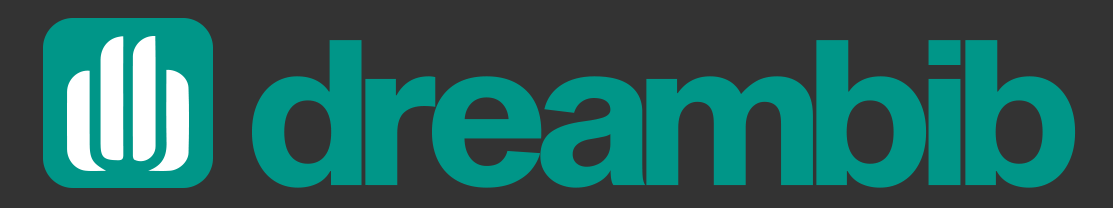
<style>
.page{position:relative;width:1113px;height:208px;background:#333333}
.page>*{position:absolute;margin:0}
.t1{font:200.1px "SequelSans-BoldDisp";letter-spacing:-0.04em;color:#009688}
</style>
<div class="page">
<p class="t1" style="left:252px;top:40px;width:824px;height:148px">dreambib</p>
</div>
